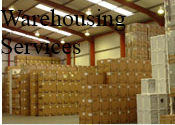
<style>
.page{position:relative;width:175px;height:125px}
.page>*{position:absolute;margin:0}
.t1{font:24px "TimesNewRomanPSMT";color:#000000}
</style>
<div class="page">
<p class="t1" style="left:0px;top:9px;width:126px;height:45px">Warehousing<br>Services</p>
</div>
